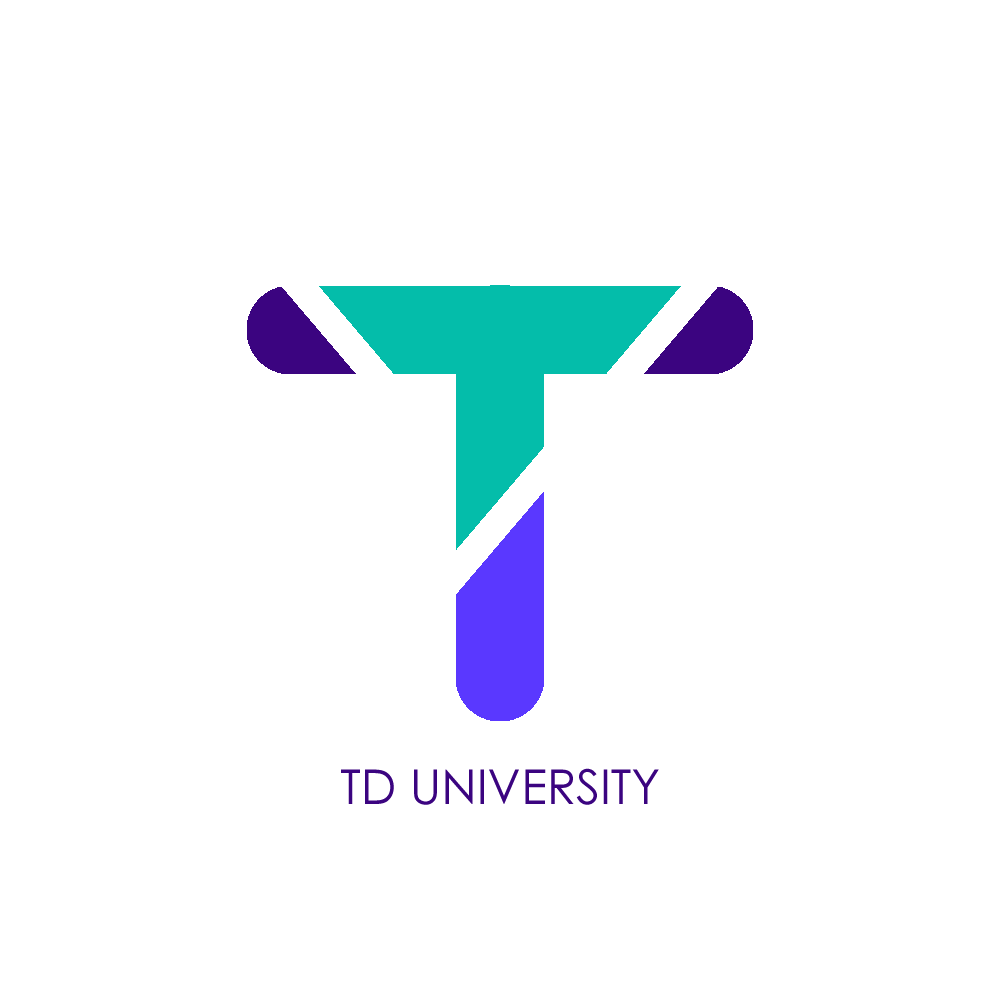
<style>
.page{position:relative;width:1000px;height:1000px;background:#ffffff}
.page>*{position:absolute;margin:0}
.t1{font:48px "CenturyGothic";color:#3b0480}
</style>
<div class="page">
<p class="t1" style="left:341px;top:768px;width:318px;height:37px">TD UNIVERSITY</p>
</div>
